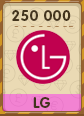
<style>
.page{position:relative;width:84px;height:116px;background:#eadab4}
.page>*{position:absolute;margin:0}
.t1{font:15px "RotondaC-Bold";letter-spacing:0.04em;color:#43341d;text-transform:uppercase}
</style>
<div class="page">
<p class="t1" style="left:12px;top:10px;width:59px;height:11px">250 000</p>
<p class="t1" style="left:33px;top:97px;width:17px;height:11px">LG</p>
</div>
